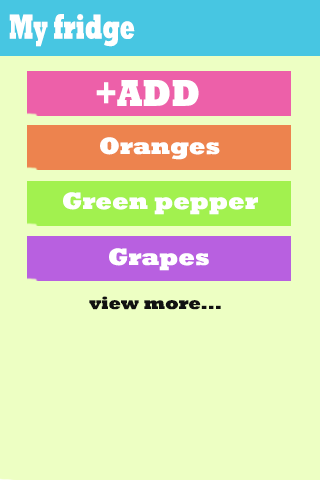
<style>
.page{position:relative;width:320px;height:480px;background:#edffc3}
.page>*{position:absolute;margin:0}
.t1{font:35.2px "Rockwell-ExtraBold";color:#ffffff;scale:0.63 1}
.t2{font:37.9px "Rockwell-ExtraBold";color:#ffffff;scale:0.87 1}
.t3{font:24px "Rockwell-ExtraBold";color:#ffffff}
.t4{font:18px "Rockwell-ExtraBold";color:#111111}
</style>
<div class="page">
<p class="t1" style="left:9px;top:14px;width:126px;height:33px">My fridge</p>
<p class="t2" style="left:96px;top:80px;width:103px;height:26px">+ADD</p>
<p class="t3" style="left:100px;top:137px;width:120px;height:23px">Oranges</p>
<p class="t3" style="left:63px;top:192px;width:195px;height:23px">Green pepper</p>
<p class="t3" style="left:109px;top:248px;width:100px;height:23px">Grapes</p>
<p class="t4" style="left:89px;top:296px;width:132px;height:14px">view more...</p>
</div>
